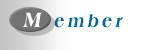
<style>
.page{position:relative;width:166px;height:50px;background:#ffffff}
.page>*{position:absolute;margin:0}
.t1{font:18px "AmericanaBT-ExtraBold";letter-spacing:0.2em;color:#006699;font-style:italic;scale:0.9 1}
.t2{font:22px "AmericanaBT-ExtraBold";letter-spacing:0.2em;color:#ffffff;font-style:italic;scale:0.9 1}
</style>
<div class="page">
<p class="t1" style="left:22px;top:12px;width:101px;height:16px"><span class="t2">M</span> ember</p>
</div>
